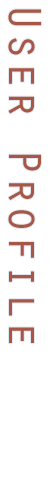
<style>
.page{position:relative;width:50px;height:500px;background:#ffffff}
.page>*{position:absolute;margin:0}
.t1{font:48px "OratorStd";color:#a65746}
</style>
<div class="page">
<p class="t1" style="left:8px;top:9px;width:33px;height:334px;rotate:90deg">User Profile</p>
</div>
